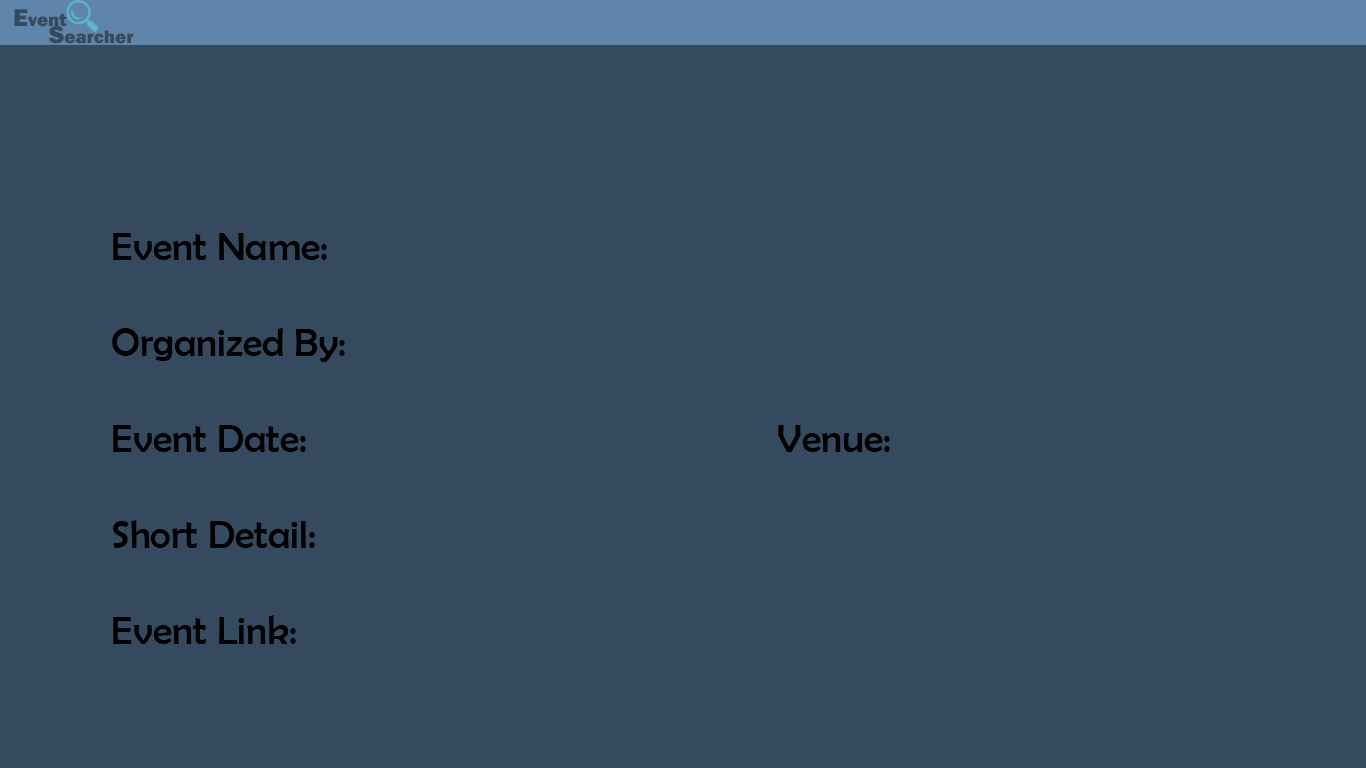
<style>
.page{position:relative;width:1366px;height:768px;background:#35495f}
.page>*{position:absolute;margin:0}
.t1{font:18.8px "FranklinGothic-Heavy";color:#35495f}
.t2{font:25.1px "FranklinGothic-Heavy";color:#35495f}
.t3{font:40px/48px "BerlinSansFB-Reg";color:#000001}
</style>
<div class="page">
<p class="t1" style="left:14px;top:9px;width:53px;height:18px"><span class="t2">E</span>vent</p>
<p class="t1" style="left:48px;top:26px;width:86px;height:18px"><span class="t2">S</span>earcher</p>
<p class="t3" style="left:112px;top:233px;width:778px;height:412px">Event Name:<br><br>Organized By: <br><br>Event Date:                                               Venue:<br><br>Short Detail:  <br><br>Event Link:</p>
</div>
